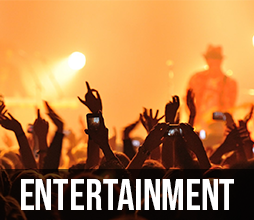
<style>
.page{position:relative;width:254px;height:220px}
.page>*{position:absolute;margin:0}
.t1{font:43.8px "BebasNeue-Regular";color:#ffffff}
</style>
<div class="page">
<p class="t1" style="left:21px;top:179px;width:213px;height:31px">Entertainment</p>
</div>
